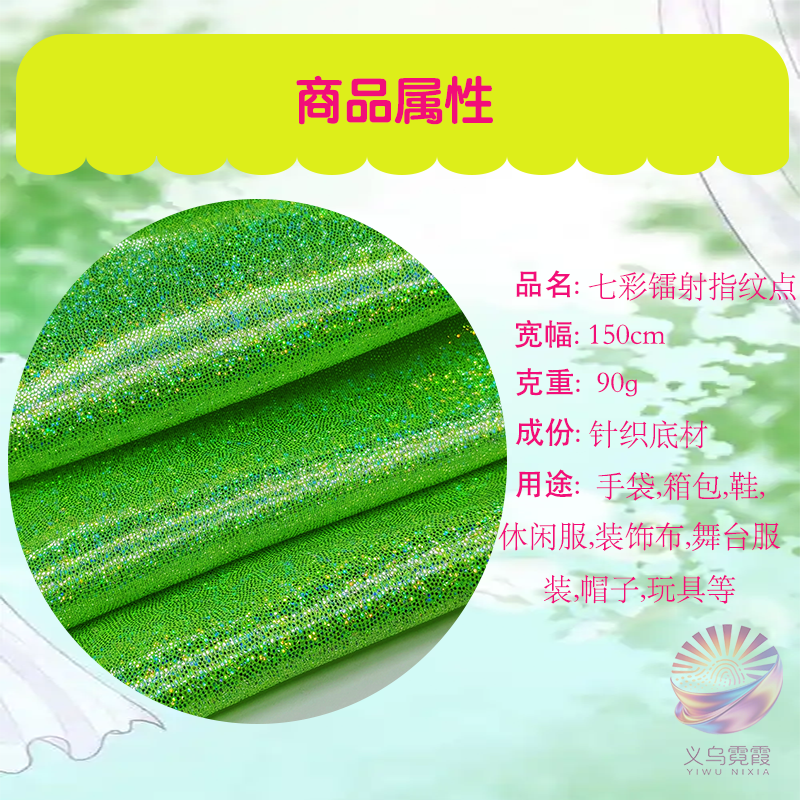
<style>
.page{position:relative;width:800px;height:800px}
.page>*{position:absolute;margin:0}
.t1{font:50px "STYuanti-SC-Bold";color:#f20e79}
.t2{font:30px "STSongti-SC-Light";color:#f20e79}
.t3{font:30px "AdobeHeitiStd-Regular";color:#f20e79}
.t4{font:30.2px "STSongti-SC-Light";color:#f20e79}
.t5{font:30.2px "AdobeHeitiStd-Regular";color:#f20e79}
</style>
<div class="page">
<p class="t1" style="left:296px;top:75px;width:197px;height:50px">商品属性</p>
<p class="t2" style="left:516px;top:270px;width:280px;height:31px"><span class="t3">品名</span>: 七彩镭射指纹点</p>
<p class="t2" style="left:515px;top:320px;width:150px;height:28px"><span class="t3">宽幅</span>: 150cm</p>
<p class="t2" style="left:516px;top:368px;width:121px;height:29px"><span class="t3">克重</span>:  90g</p>
<p class="t2" style="left:515px;top:418px;width:193px;height:31px"><span class="t3">成份</span>: 针织底材</p>
<p class="t4" style="left:498px;top:469px;width:283px;height:135px;text-align:center"><span class="t5">用途</span>:  手袋,箱包,鞋,<br>休闲服,装饰布,舞台服<br>装,帽子,玩具等</p>
</div>
